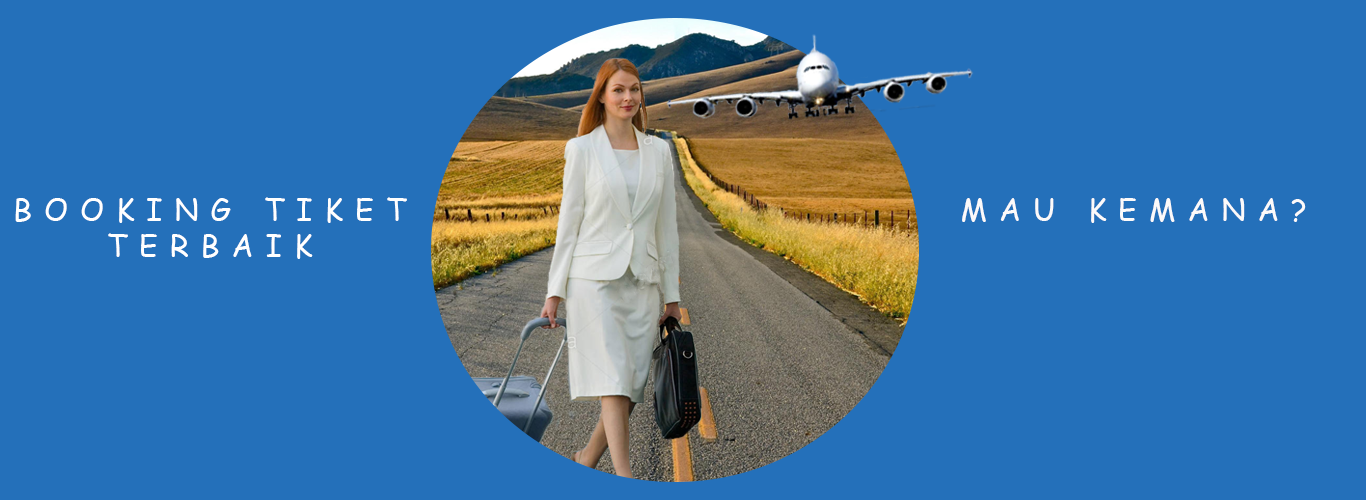
<style>
.page{position:relative;width:1366px;height:500px;background:#2470ba}
.page>*{position:absolute;margin:0}
.t1{font:30px "ComicSansMS";letter-spacing:0.4em;color:#ffffff}
.t2{font:30px "ComicSansMS";letter-spacing:0.4em;color:#fcfafa}
</style>
<div class="page">
<p class="t1" style="left:15px;top:197px;width:392px;height:62px;text-align:center">BOOKING TIKET<br>TERBAIK</p>
<p class="t2" style="left:962px;top:198px;width:344px;height:25px">MAU KEMANA?</p>
</div>
